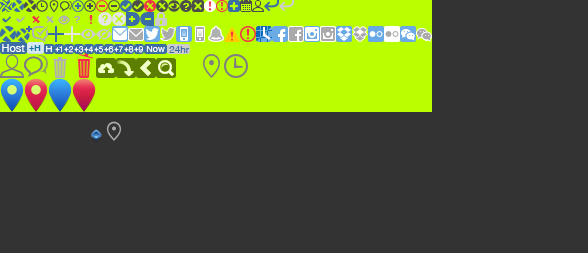
<style>
.page{position:relative;width:588px;height:253px;background:#333333}
.page>*{position:absolute;margin:0}
.t1{font:11px "HelveticaNeue";color:#ffffff}
.t2{font:9px "HelveticaNeue-Light";color:#ffffff}
.t3{font:8px "HelveticaNeue-Light";color:#ffffff}
.t4{font:9px "HelveticaNeue";color:#ffffff}
.t5{font:10px "HelveticaNeue";color:#3a6ea5}
</style>
<div class="page">
<p class="t1" style="left:2px;top:44px;width:23px;height:8px">Host</p>
<p class="t2" style="left:59px;top:46px;width:3px;height:6px">1</p>
<p class="t3" style="left:68px;top:46px;width:5px;height:7px">2</p>
<p class="t3" style="left:78px;top:46px;width:6px;height:7px">3</p>
<p class="t3" style="left:88px;top:46px;width:5px;height:7px">4</p>
<p class="t3" style="left:98px;top:46px;width:5px;height:7px">5</p>
<p class="t3" style="left:108px;top:46px;width:6px;height:7px">6</p>
<p class="t3" style="left:119px;top:46px;width:4px;height:7px">7</p>
<p class="t3" style="left:128px;top:46px;width:6px;height:7px">8</p>
<p class="t3" style="left:138px;top:46px;width:5px;height:7px">9</p>
<p class="t4" style="left:146px;top:46px;width:19px;height:6px">Now</p>
<p class="t5" style="left:169px;top:46px;width:21px;height:7px">24hr</p>
</div>
